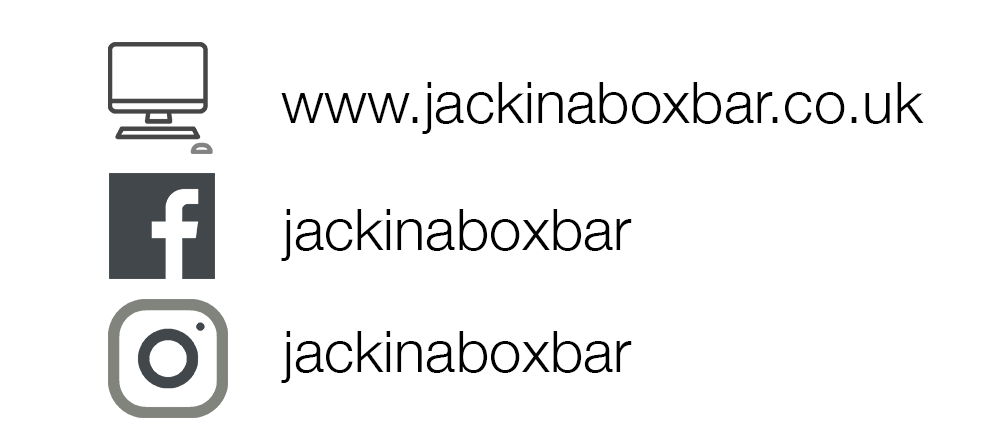
<style>
.page{position:relative;width:992px;height:441px;background:#ffffff}
.page>*{position:absolute;margin:0}
.t1{font:58.3px "HelveticaNeue-Light";color:#000000}
</style>
<div class="page">
<p class="t1" style="left:281px;top:82px;width:643px;height:52px">www.jackinaboxbar.co.uk</p>
<p class="t1" style="left:281px;top:209px;width:351px;height:52px">jackinaboxbar</p>
<p class="t1" style="left:281px;top:331px;width:351px;height:52px">jackinaboxbar</p>
</div>
